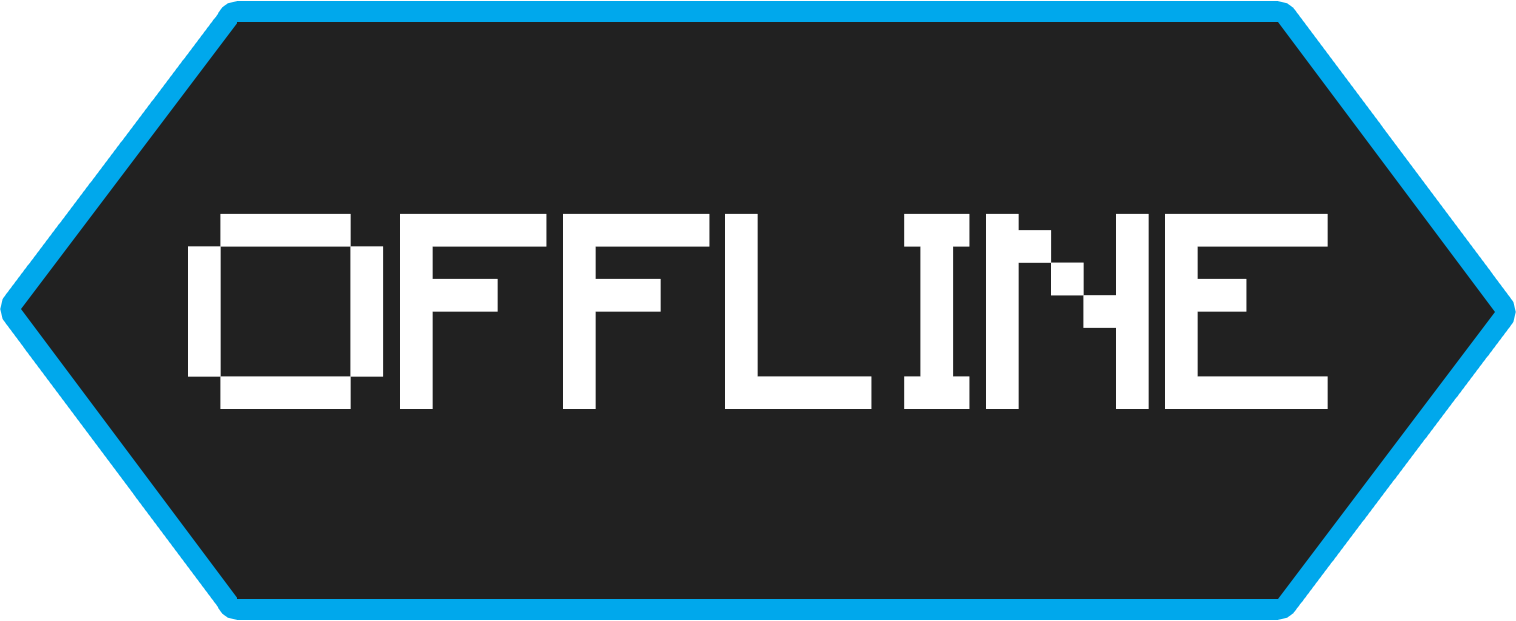
<style>
.page{position:relative;width:1516px;height:621px;background:#212121}
.page>*{position:absolute;margin:0}
.t1{font:260.3px "Minecraft";color:#ffffff}
</style>
<div class="page">
<p class="t1" style="left:188px;top:213px;width:1140px;height:196px">OFFLINE</p>
</div>
